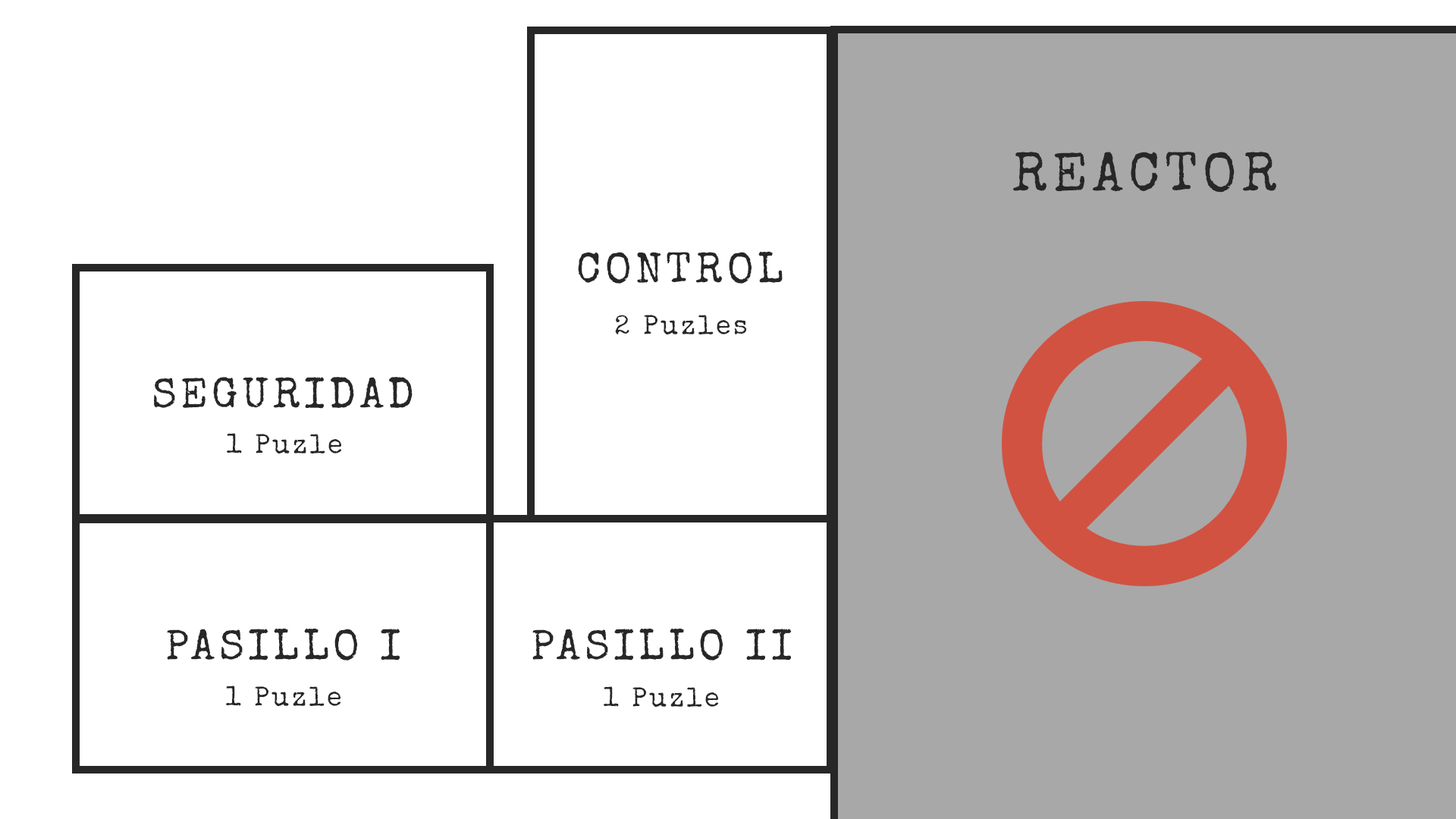
<style>
.page{position:relative;width:1456px;height:819px;background:#ffffff}
.page>*{position:absolute;margin:0}
.t1{font:54.6px "SpecialElite-Regular";letter-spacing:0.1em;color:#272727}
.t2{font:42.5px "SpecialElite-Regular";letter-spacing:0.1em;color:#272727}
.t3{font:27.3px "SpecialElite-Regular";letter-spacing:0.1em;color:#272727}
</style>
<div class="page">
<p class="t1" style="left:1013px;top:152px;width:263px;height:41px">REACTOR</p>
<p class="t2" style="left:578px;top:251px;width:205px;height:33px">CONTROL</p>
<p class="t3" style="left:615px;top:315px;width:132px;height:19px">2 Puzles</p>
<p class="t2" style="left:154px;top:377px;width:259px;height:32px">SEGURIDAD</p>
<p class="t3" style="left:227px;top:433px;width:114px;height:20px">1 Puzle</p>
<p class="t2" style="left:166px;top:628px;width:234px;height:32px">PASILLO I</p>
<p class="t2" style="left:532px;top:628px;width:260px;height:32px">PASILLO II</p>
<p class="t3" style="left:226px;top:686px;width:114px;height:20px">1 Puzle</p>
<p class="t3" style="left:604px;top:686px;width:114px;height:21px">1 Puzle</p>
</div>
